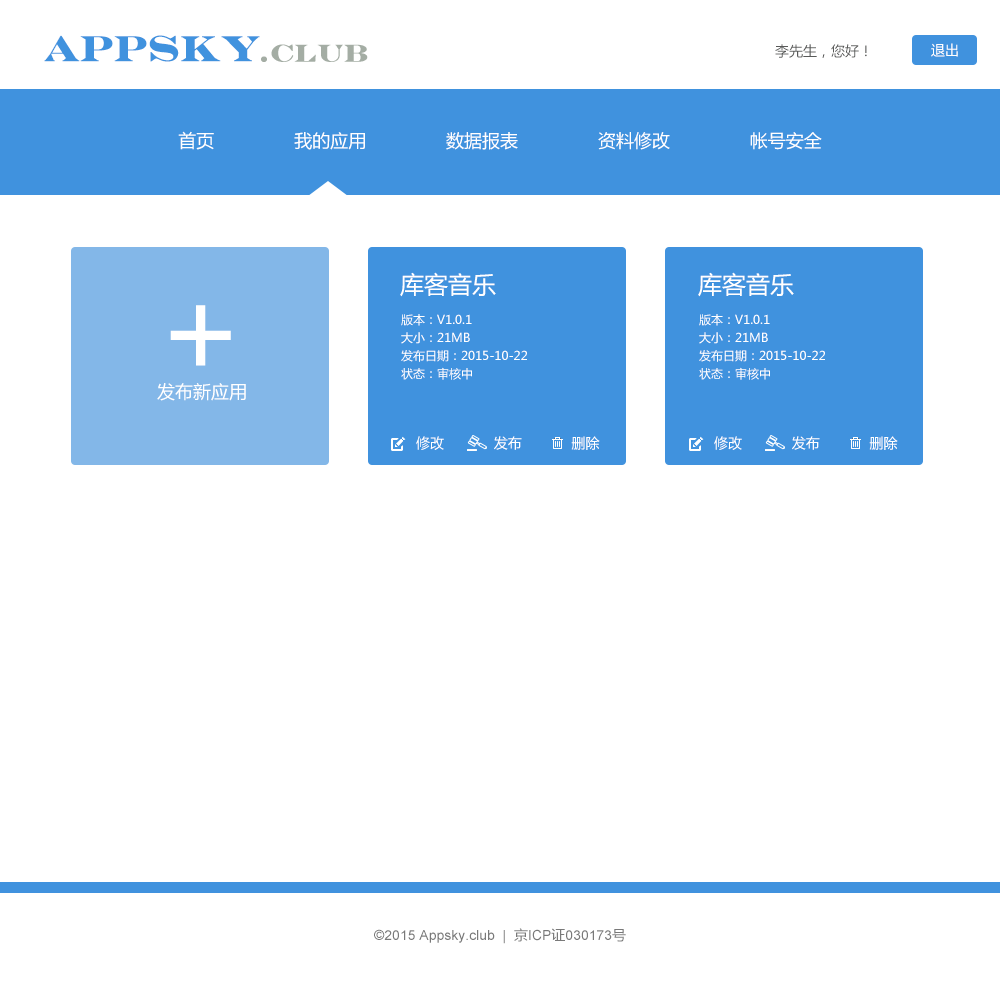
<style>
.page{position:relative;width:1000px;height:1000px;background:#ffffff}
.page>*{position:absolute;margin:0}
.t1{font:36px "EngraversMT-Bold";color:#4092de;font-weight:bold}
.t2{font:24.4px "EngraversMT-Bold";color:#a4ada4;font-weight:bold}
.t3{font:14px "MicrosoftYaHei";color:#585958}
.t4{font:14px "MicrosoftYaHei";color:#ffffff}
.t5{font:18px "MicrosoftYaHei";color:#ffffff}
.t6{font:24px "MicrosoftYaHei";color:#ffffff}
.t7{font:120.4px "MicrosoftYaHei";color:#ffffff}
.t8{font:12px/18px "MicrosoftYaHei";color:#ffffff}
.t9{font:14px "ArialMT";color:#797979}
.t10{font:14px "MicrosoftYaHei";color:#797979}
</style>
<div class="page">
<p class="t1" style="left:44px;top:35px;width:216px;height:27px">APPSky</p>
<p class="t2" style="left:261px;top:44px;width:107px;height:18px">.CLUB</p>
<p class="t3" style="left:775px;top:44px;width:92px;height:14px">李先生，您好！</p>
<p class="t4" style="left:931px;top:43px;width:27px;height:14px">退出</p>
<p class="t5" style="left:178px;top:131px;width:644px;height:19px">首页               我的应用               数据报表               资料修改               帐号安全</p>
<p class="t6" style="left:400px;top:272px;width:96px;height:25px">库客音乐</p>
<p class="t6" style="left:698px;top:272px;width:96px;height:25px">库客音乐</p>
<p class="t7" style="left:170px;top:305px;width:61px;height:61px">+</p>
<p class="t8" style="left:401px;top:314px;width:126px;height:66px">版本：V1.0.1<br>大小：21MB<br>发布日期：2015-10-22<br>状态：审核中</p>
<p class="t8" style="left:699px;top:314px;width:126px;height:66px">版本：V1.0.1<br>大小：21MB<br>发布日期：2015-10-22<br>状态：审核中</p>
<p class="t5" style="left:157px;top:383px;width:89px;height:18px">发布新应用</p>
<p class="t4" style="left:416px;top:436px;width:184px;height:14px">修改            发布            删除</p>
<p class="t4" style="left:714px;top:436px;width:184px;height:14px">修改            发布            删除</p>
<p class="t9" style="left:374px;top:928px;width:252px;height:16px">©2015 Appsky.club  |  <span class="t10">京</span>ICP<span class="t10">证</span>030173<span class="t10">号</span></p>
</div>
